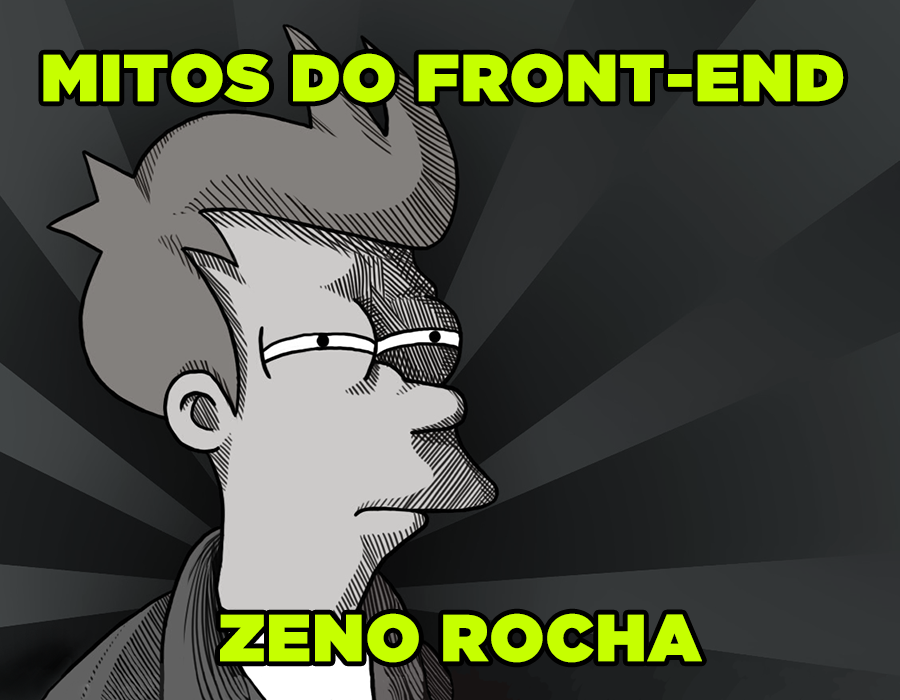
<style>
.page{position:relative;width:900px;height:700px}
.page>*{position:absolute;margin:0}
.t1{font:66.1px "GothamUltra";color:#c6ff00;font-weight:bold}
</style>
<div class="page">
<p class="t1" style="left:43px;top:53px;width:801px;height:50px">MITOS DO FRONT-END</p>
<p class="t1" style="left:220px;top:613px;width:482px;height:50px">ZENO ROCHA</p>
</div>
